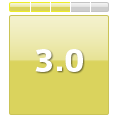
<style>
.page{position:relative;width:117px;height:117px;background:#dad35d}
.page>*{position:absolute;margin:0}
.t1{font:36px "Colaborate-Bold";color:#ffffff;text-transform:uppercase}
</style>
<div class="page">
<p class="t1" style="left:35px;top:49px;width:48px;height:23px">3.0</p>
</div>
